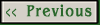
<style>
.page{position:relative;width:100px;height:25px;background:#d4d0c8}
.page>*{position:absolute;margin:0}
.t1{font:22.2px "JSChusrias";letter-spacing:0.025em;color:#29672b;font-weight:bold;scale:0.82 1}
.t2{font:22.2px "JSChusrias";letter-spacing:0.025em;color:#29672b;font-weight:bold;scale:0.49 1}
</style>
<div class="page">
<p class="t1" style="left:6px;top:4px;width:86px;height:13px"><span class="t2">&lt;&lt; </span>Previous</p>
</div>
